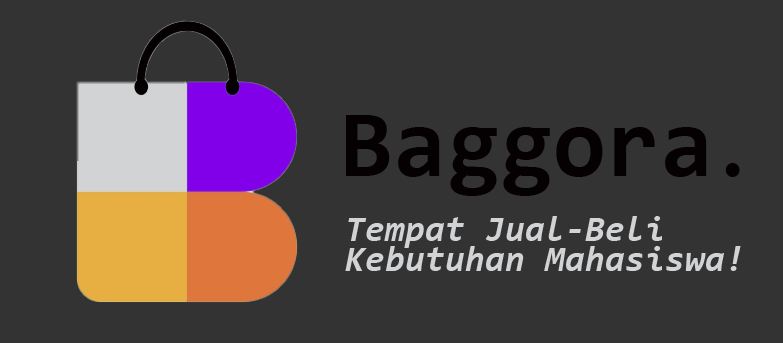
<style>
.page{position:relative;width:783px;height:343px;background:#333333}
.page>*{position:absolute;margin:0}
.t1{font:96px "Consolas-Bold";letter-spacing:0.005em;color:#050103}
.t2{font:72px "Consolas-Bold";letter-spacing:0.005em;color:#050103}
.t3{font:36px/30px "Consolas-BoldItalic";letter-spacing:0.005em;color:#d2d3d5}
</style>
<div class="page">
<p class="t1" style="left:346px;top:115px;width:394px;height:81px">Baggora<span class="t2">.</span></p>
<p class="t3" style="left:345px;top:216px;width:396px;height:55px">Tempat Jual-Beli <br>Kebutuhan Mahasiswa!</p>
</div>
